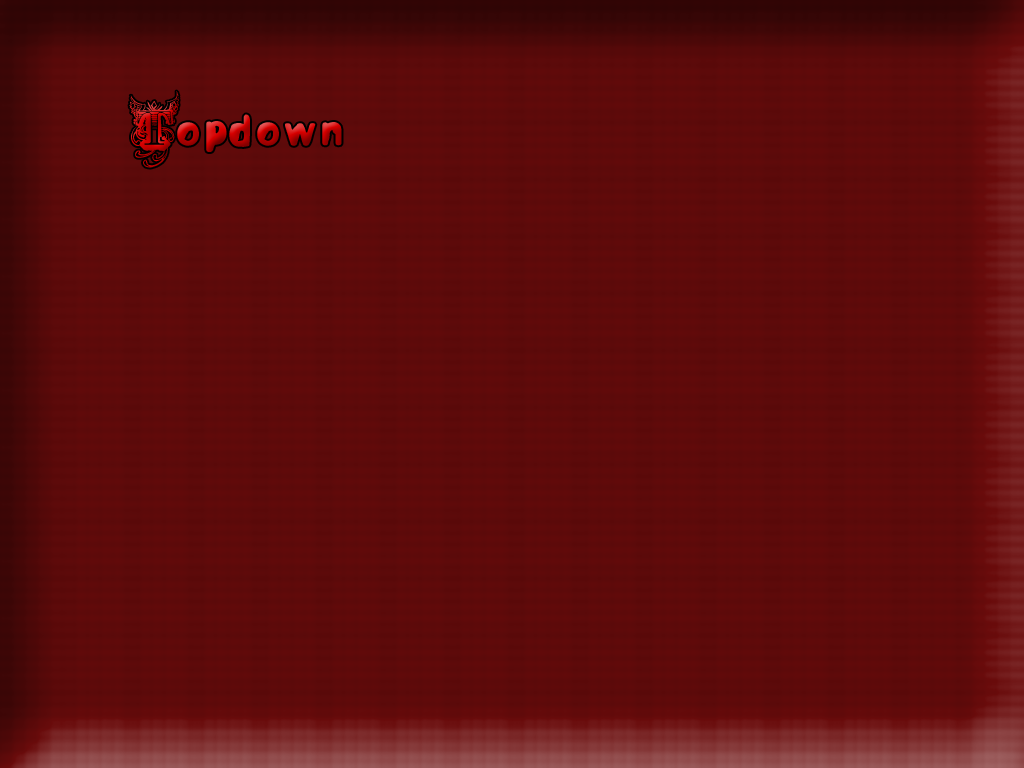
<style>
.page{position:relative;width:1024px;height:768px}
.page>*{position:absolute;margin:0}
.t1{font:72px "VtksRevolt"}
</style>
<div class="page">
<p class="t1" style="left:129px;top:91px;width:213px;height:77px">Topdown</p>
</div>
